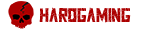
<style>
.page{position:relative;width:150px;height:29px;background:#ffffff}
.page>*{position:absolute;margin:0}
.t1{font:29px "CracksupDemoRegular";color:#ab0000}
</style>
<div class="page">
<p class="t1" style="left:39px;top:7px;width:92px;height:16px">hardgaming</p>
</div>
